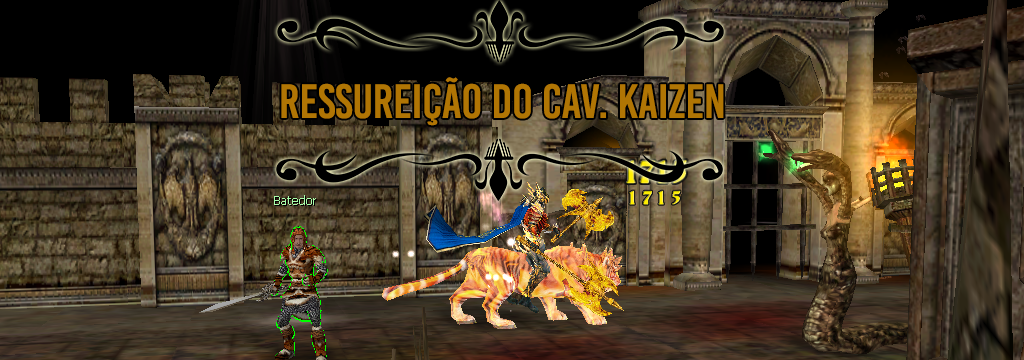
<style>
.page{position:relative;width:1024px;height:360px}
.page>*{position:absolute;margin:0}
.t1{font:48px "BebasKai";color:#b07504}
</style>
<div class="page">
<p class="t1" style="left:281px;top:77px;width:443px;height:49px">Ressureição DO CAV. KAIZEN</p>
</div>
